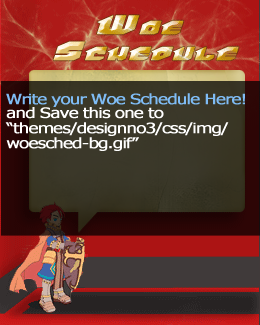
<style>
.page{position:relative;width:260px;height:325px}
.page>*{position:absolute;margin:0}
.t1{font:14px "Verdana";letter-spacing:-0.08em;color:#7fbcf5;font-weight:bold;scale:1.2 1}
.t2{font:14px/15.1px "Verdana";letter-spacing:-0.08em;color:#ffffff;font-weight:bold;scale:1.2 1}
</style>
<div class="page">
<p class="t1" style="left:6px;top:93px;width:239px;height:14px">Write your Woe Schedule Here!</p>
<p class="t2" style="left:5px;top:107px;width:224px;height:44px">and Save this one to “themes/designno3/css/img/<br>woesched-bg.gif”</p>
</div>
